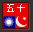
<style>
.page{position:relative;width:33px;height:32px;background:#f20000}
.page>*{position:absolute;margin:0}
.t1{font:10.4px "SimSun";color:#ffffff}
</style>
<div class="page">
<p class="t1" style="left:7px;top:4px;width:18px;height:8px">五十</p>
</div>
